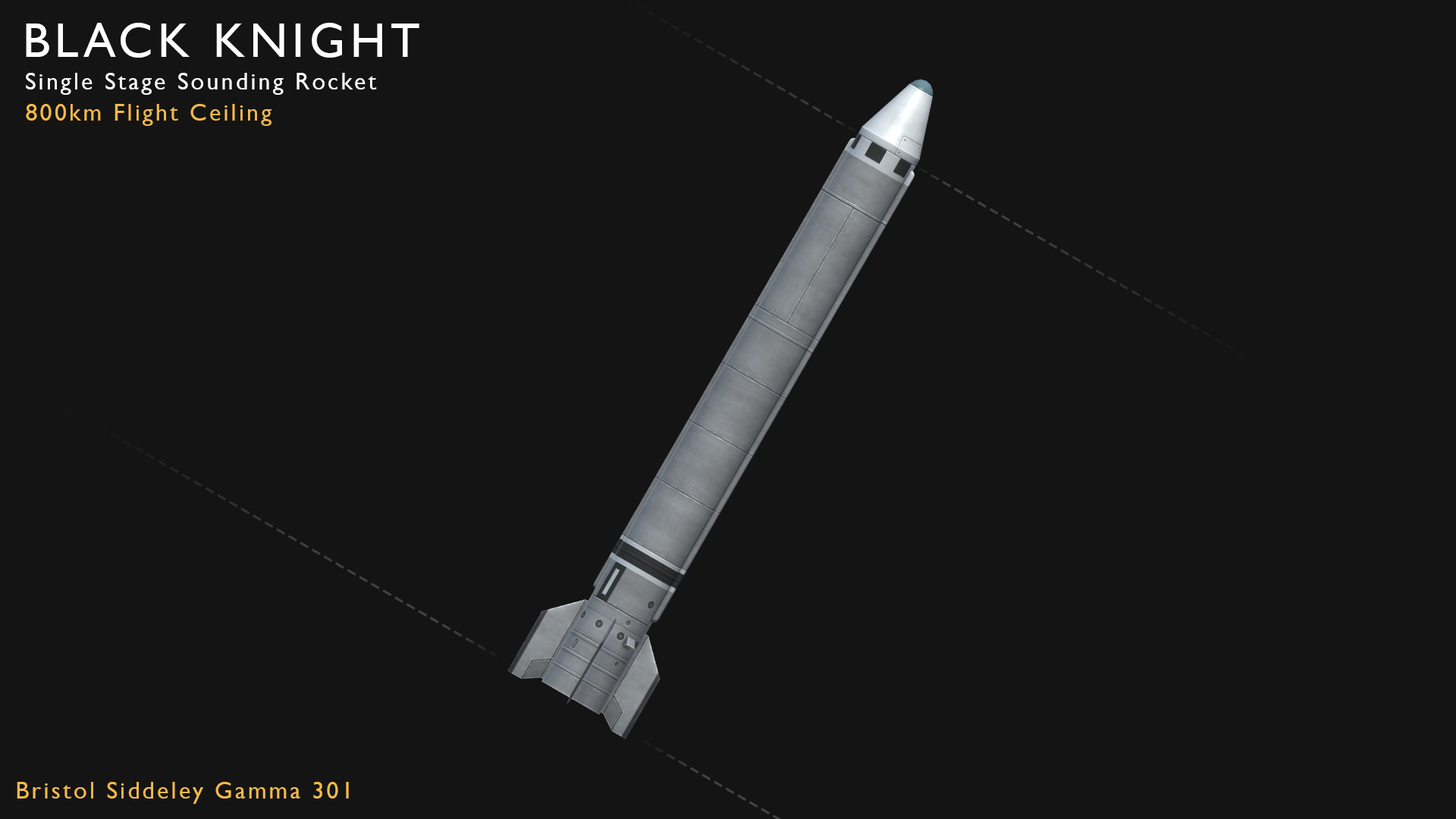
<style>
.page{position:relative;width:1456px;height:819px;background:#141414}
.page>*{position:absolute;margin:0}
.t1{font:48.5px "GillSansMT";letter-spacing:0.1em;color:#ffffff}
.t2{font:24.3px "GillSansMT";letter-spacing:0.1em;color:#ffffff}
.t3{font:24.3px "GillSansMT";letter-spacing:0.1em;color:#f4ba4a}
</style>
<div class="page">
<p class="t1" style="left:26px;top:23px;width:393px;height:35px">BLACK KNIGHT</p>
<p class="t2" style="left:26px;top:73px;width:351px;height:22px">Single Stage Sounding Rocket</p>
<p class="t3" style="left:26px;top:104px;width:245px;height:22px">800km Flight Ceiling</p>
<p class="t3" style="left:17px;top:782px;width:332px;height:22px">Bristol Siddeley Gamma 301</p>
</div>
